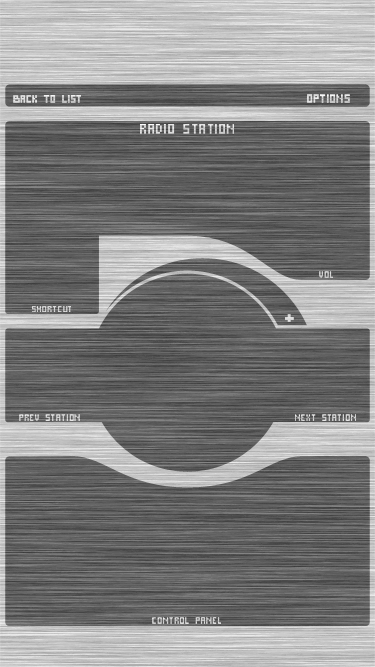
<style>
.page{position:relative;width:375px;height:667px}
.page>*{position:absolute;margin:0}
.t1{font:10.6px "PixelCyr-Normal"}
.t2{font:11.7px "PixelCyr-Normal";color:#d9d9d9}
.t3{font:14.1px "PixelCyr-Normal";color:#dedede}
.t4{font:9.4px "PixelCyr-Normal";color:#cccccc}
.t5{font:19.9px "PixelCyr-Normal";color:#cccccc}
</style>
<div class="page">
<p class="t1" style="left:13px;top:95px;width:68px;height:8px">back to list</p>
<p class="t2" style="left:307px;top:94px;width:43px;height:9px">options</p>
<p class="t3" style="left:140px;top:124px;width:94px;height:10px">radio station</p>
<p class="t4" style="left:319px;top:271px;width:14px;height:7px">vol</p>
<p class="t4" style="left:32px;top:306px;width:39px;height:6px">shortcut</p>
<p class="t5" style="left:285px;top:314px;width:9px;height:8px">+</p>
<p class="t4" style="left:19px;top:414px;width:61px;height:7px">prev station</p>
<p class="t4" style="left:295px;top:414px;width:61px;height:7px">next station</p>
<p class="t4" style="left:152px;top:617px;width:69px;height:7px">control panel</p>
</div>
